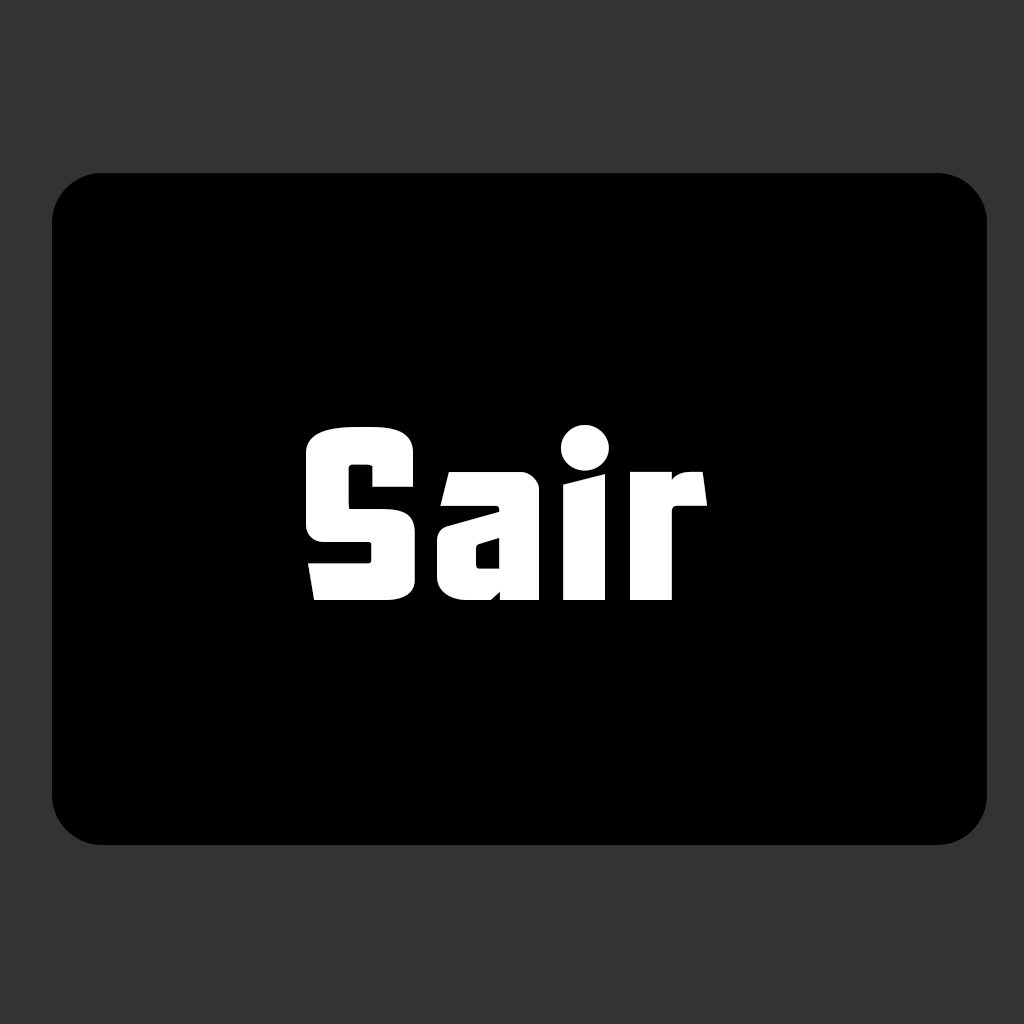
<style>
.page{position:relative;width:1024px;height:1024px;background:#000000}
.page>*{position:absolute;margin:0}
.t1{font:235.1px "AmericanCaptainPatrius";color:#ffffff}
</style>
<div class="page">
<p class="t1" style="left:306px;top:425px;width:402px;height:175px">Sair</p>
</div>
